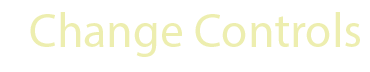
<style>
.page{position:relative;width:370px;height:72px;background:#ffffff}
.page>*{position:absolute;margin:0}
.t1{font:48px "MyriadPro-Regular";color:#edeeaf}
</style>
<div class="page">
<p class="t1" style="left:30px;top:12px;width:330px;height:45px">Change Controls</p>
</div>
